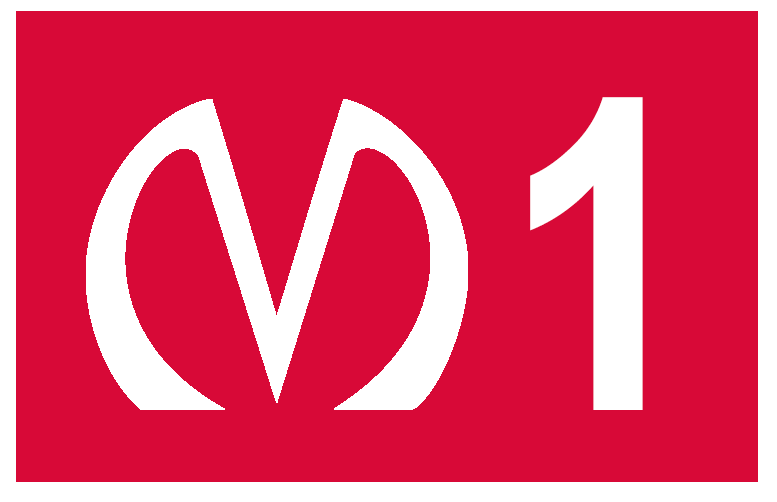
<style>
.page{position:relative;width:777px;height:502px;background:#d80937}
.page>*{position:absolute;margin:0}
.t1{font:435px "ArialNarrow-Bold";color:#ffffff}
</style>
<div class="page">
<p class="t1" style="left:530px;top:97px;width:113px;height:313px">1</p>
</div>
